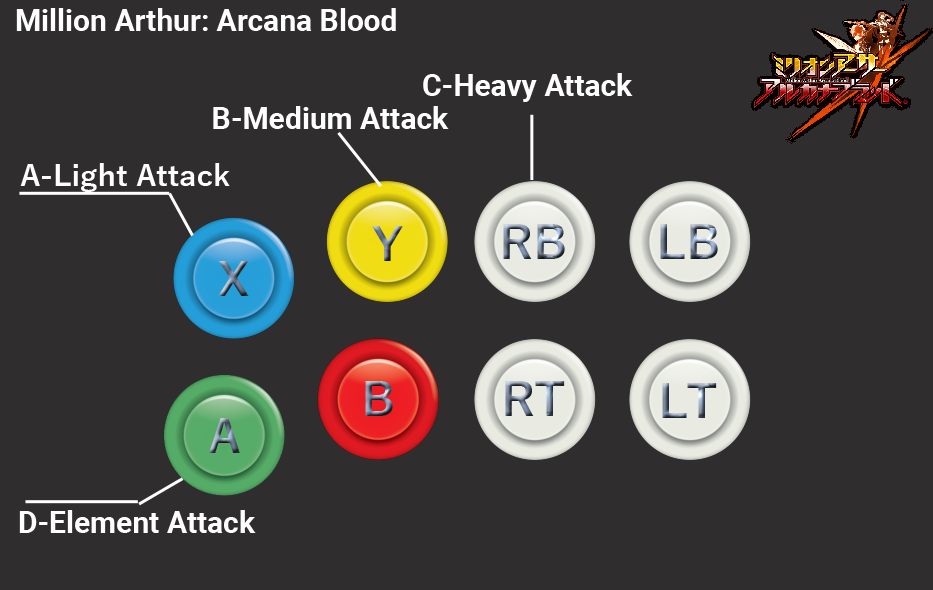
<style>
.page{position:relative;width:933px;height:590px;background:#2f2d2e}
.page>*{position:absolute;margin:0}
.t1{font:30px "Roboto-Bold";color:#ffffff}
.t2{font:30px "YuGothic-Bold";color:#ffffff}
</style>
<div class="page">
<p class="t1" style="left:16px;top:8px;width:380px;height:23px">Million Arthur: Arcana Blood</p>
<p class="t1" style="left:423px;top:73px;width:210px;height:29px">C-Heavy Attack</p>
<p class="t1" style="left:213px;top:106px;width:236px;height:23px">B-Medium Attack</p>
<p class="t2" style="left:20px;top:163px;width:210px;height:29px">A-Light Attack</p>
<p class="t1" style="left:19px;top:510px;width:237px;height:23px">D-Element Attack</p>
</div>
